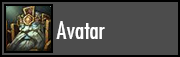
<style>
.page{position:relative;width:180px;height:57px;background:#4c4c4c}
.page>*{position:absolute;margin:0}
.t1{font:24px "FuturaCondensed";color:#ffffff}
</style>
<div class="page">
<p class="t1" style="left:56px;top:21px;width:49px;height:18px">Avatar</p>
</div>
